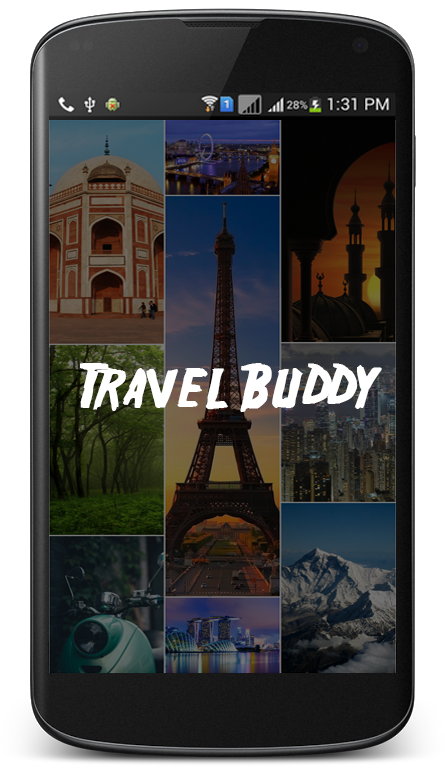
<style>
.page{position:relative;width:445px;height:776px}
.page>*{position:absolute;margin:0}
.t1{font:56.4px "Friday13";color:#ffffff;scale:1.05 1}
</style>
<div class="page">
<p class="t1" style="left:80px;top:363px;width:302px;height:49px">Travel Buddy</p>
</div>
